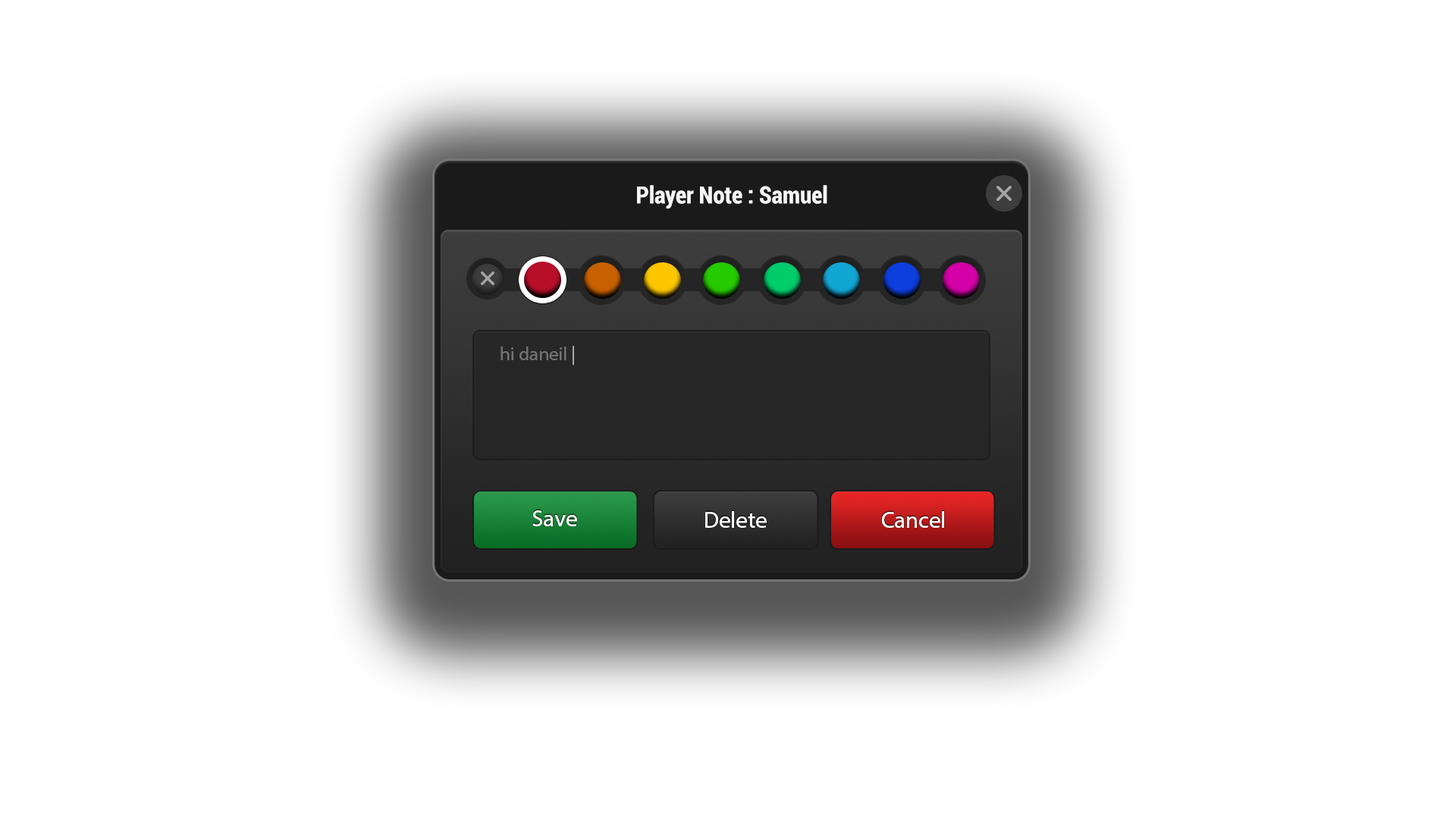
<style>
.page{position:relative;width:1456px;height:819px;background:#ffffff}
.page>*{position:absolute;margin:0}
.t1{font:23.7px "Roboto-BoldCondensed";color:#f6f6f6}
.t2{font:19px "MyriadHebrew-Regular";color:#737373}
.t3{font:19px "MyriadHebrew-Regular";color:#b0afaf}
.t4{font:23.4px "MyriadHebrew-Regular";color:#ffffff}
</style>
<div class="page">
<p class="t1" style="left:637px;top:185px;width:190px;height:24px">Player Note : Samuel</p>
<p class="t2" style="left:500px;top:346px;width:74px;height:20px">hi daneil <span class="t3">|</span></p>
<p class="t4" style="left:532px;top:510px;width:45px;height:16px">Save</p>
<p class="t4" style="left:705px;top:511px;width:62px;height:17px">Delete</p>
<p class="t4" style="left:881px;top:511px;width:63px;height:17px">Cancel</p>
</div>
